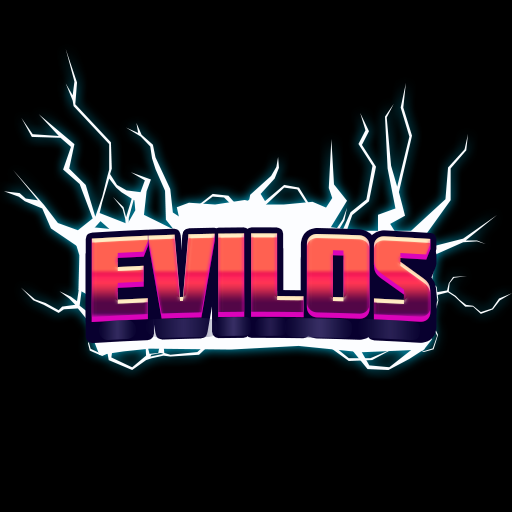
<style>
.page{position:relative;width:512px;height:512px;background:#000000}
.page>*{position:absolute;margin:0}
.t1{font:119px "Molot";letter-spacing:-0.025em}
</style>
<div class="page">
<p class="t1" style="left:91px;top:233px;width:340px;height:89px">Evilos</p>
</div>
